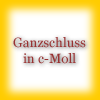
<style>
.page{position:relative;width:100px;height:100px}
.page>*{position:absolute;margin:0}
.t1{font:13.3px "Georgia";color:#993333}
.t2{font:13.3px "Georgia";color:#000080}
</style>
<div class="page">
<p class="t1" style="left:13px;top:37px;width:73px;height:27px;text-align:center"><span class="t2"><br></span>Ganzschluss<br>in c-Moll</p>
</div>
